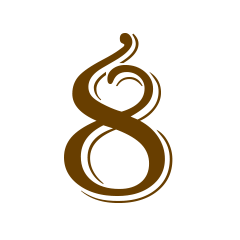
<style>
.page{position:relative;width:240px;height:240px;background:#ffffff}
.page>*{position:absolute;margin:0}
.t1{font:203.2px "Algerian";color:#683e00}
</style>
<div class="page">
<p class="t1" style="left:64px;top:33px;width:109px;height:170px">8</p>
</div>
